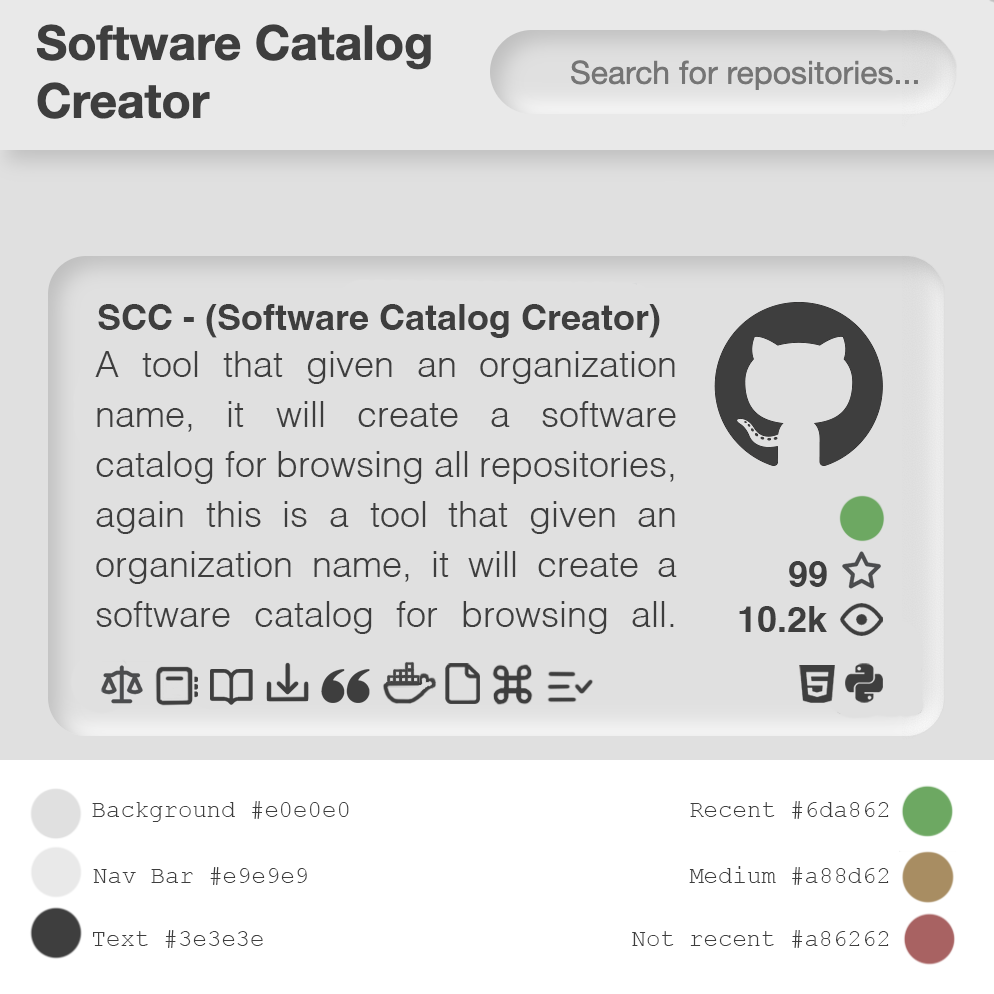
<style>
.page{position:relative;width:994px;height:994px;background:#e0e0e0}
.page>*{position:absolute;margin:0}
.t1{font:36px "Helvetica-Bold";color:#3e3e3e}
.t2{font:36px/50px "Helvetica-Light";color:#3e3e3e}
.t3{font:24px "CourierNewPSMT";color:#3e3e3e}
</style>
<div class="page">
<p class="t1" style="left:98px;top:304px;width:562px;height:34px">SCC - (Software Catalog Creator)</p>
<p class="t2" style="left:95px;top:351px;width:582px;height:283px;text-align:justify">A tool that given an organization name, it will create a software catalog for browsing all repositories, again this is a tool that given an organization name, it will create a software catalog for browsing all. repositories.</p>
<p class="t1" style="left:789px;top:561px;width:38px;height:26px">99</p>
<p class="t1" style="left:739px;top:606px;width:88px;height:26px">10.2k</p>
<p class="t3" style="left:92px;top:801px;width:257px;height:21px">Background #e0e0e0</p>
<p class="t3" style="left:690px;top:801px;width:199px;height:18px">Recent #6da862</p>
<p class="t3" style="left:93px;top:867px;width:214px;height:18px">Nav Bar #e9e9e9</p>
<p class="t3" style="left:689px;top:866px;width:200px;height:19px">Medium #a88d62</p>
<p class="t3" style="left:93px;top:930px;width:170px;height:18px">Text #3e3e3e</p>
<p class="t3" style="left:632px;top:930px;width:257px;height:18px">Not recent #a86262</p>
</div>
